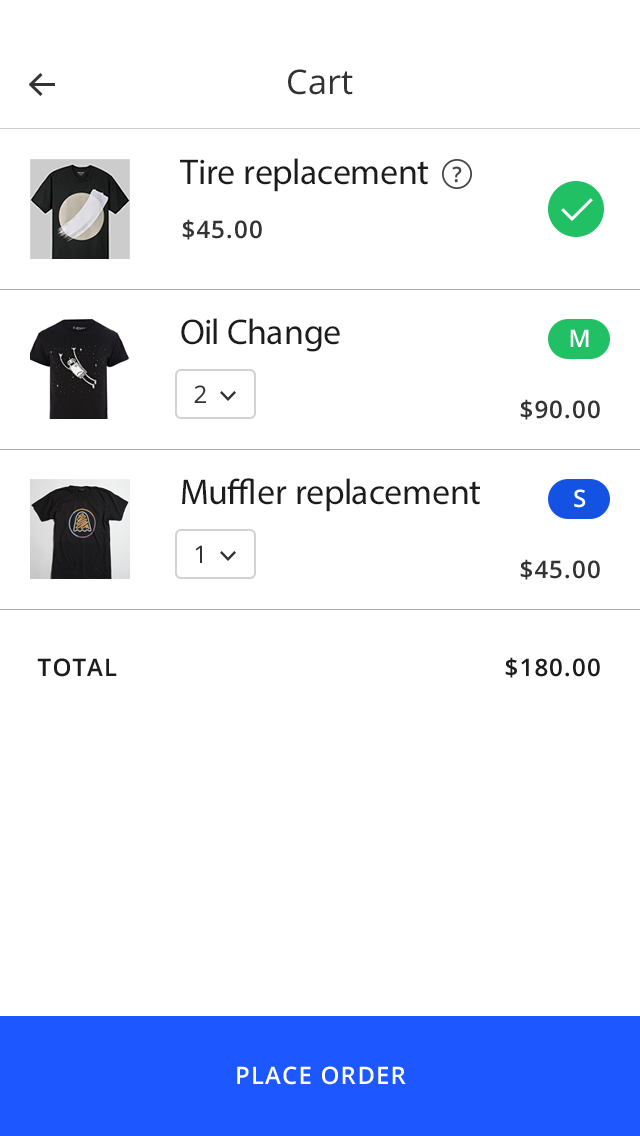
<style>
.page{position:relative;width:640px;height:1136px;background:#ffffff}
.page>*{position:absolute;margin:0}
.t1{font:34px "OpenSans";letter-spacing:0.01em;color:#333333}
.t2{font:36px "MyriadPro-Regular";color:#1c1c1c}
.t3{font:24px "OpenSans-Semibold";letter-spacing:0.05em;color:#333333;text-transform:uppercase}
.t4{font:24px "OpenSans-Semibold";letter-spacing:0.05em;color:#ffffff;text-transform:uppercase}
.t5{font:24px "OpenSans";letter-spacing:0.05em;color:#333333}
.t6{font:24px "OpenSans-Semibold";letter-spacing:0.05em;color:#1c1c1c;text-transform:uppercase}
</style>
<div class="page">
<p class="t1" style="left:288px;top:69px;width:65px;height:26px">Cart</p>
<p class="t2" style="left:180px;top:158px;width:248px;height:34px">Tire replacement</p>
<p class="t3" style="left:182px;top:219px;width:80px;height:21px">$45.00</p>
<p class="t2" style="left:181px;top:318px;width:159px;height:34px">Oil Change</p>
<p class="t4" style="left:570px;top:329px;width:19px;height:18px">M</p>
<p class="t5" style="left:194px;top:385px;width:12px;height:18px">2</p>
<p class="t3" style="left:520px;top:399px;width:80px;height:21px">$90.00</p>
<p class="t2" style="left:182px;top:478px;width:298px;height:34px">Muffler replacement</p>
<p class="t4" style="left:574px;top:489px;width:12px;height:19px">S</p>
<p class="t5" style="left:195px;top:545px;width:7px;height:18px">1</p>
<p class="t3" style="left:520px;top:559px;width:80px;height:21px">$45.00</p>
<p class="t6" style="left:37px;top:658px;width:80px;height:19px">total</p>
<p class="t6" style="left:505px;top:657px;width:95px;height:21px">$180.00</p>
<p class="t4" style="left:237px;top:1066px;width:169px;height:19px">place order</p>
</div>
